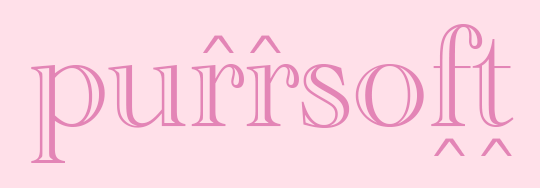
<style>
.page{position:relative;width:540px;height:188px;background:#ffe0e9}
.page>*{position:absolute;margin:0}
.t1{font:150px "AcademyEngravedLetPlain";color:#e385b6}
.t2{font:72px "LaoSangamMN";color:#e385b6}
</style>
<div class="page">
<p class="t1" style="left:31px;top:24px;width:483px;height:139px">purrsoft</p>
<p class="t2" style="left:203px;top:35px;width:78px;height:18px">^ ^</p>
<p class="t2" style="left:434px;top:138px;width:78px;height:18px">^ ^</p>
</div>
